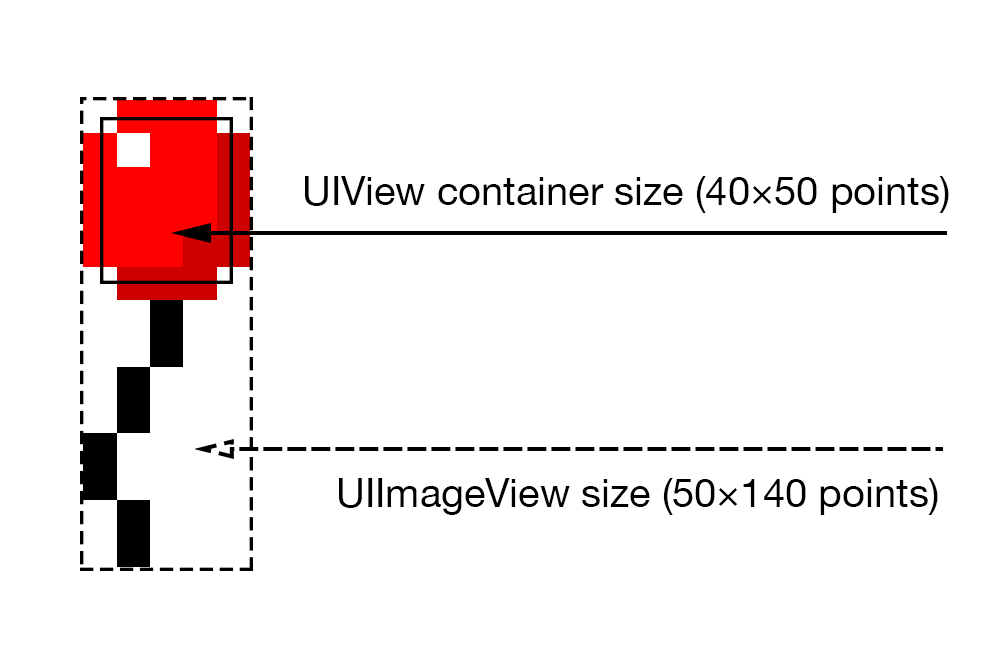
<style>
.page{position:relative;width:1000px;height:667px;background:#ffffff}
.page>*{position:absolute;margin:0}
.t1{font:40px "HelveticaNeue";color:#000000}
</style>
<div class="page">
<p class="t1" style="left:305px;top:176px;width:644px;height:37px">UIView container size (40×50 points)</p>
<p class="t1" style="left:339px;top:478px;width:599px;height:37px">UIImageView size (50×140 points)</p>
</div>
